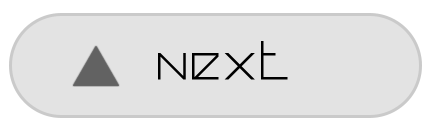
<style>
.page{position:relative;width:430px;height:130px;background:#e3e3e3}
.page>*{position:absolute;margin:0}
.t1{font:77px "AuricomRegular";letter-spacing:0.05em;color:#000000}
</style>
<div class="page">
<p class="t1" style="left:158px;top:41px;width:130px;height:39px">next</p>
</div>
